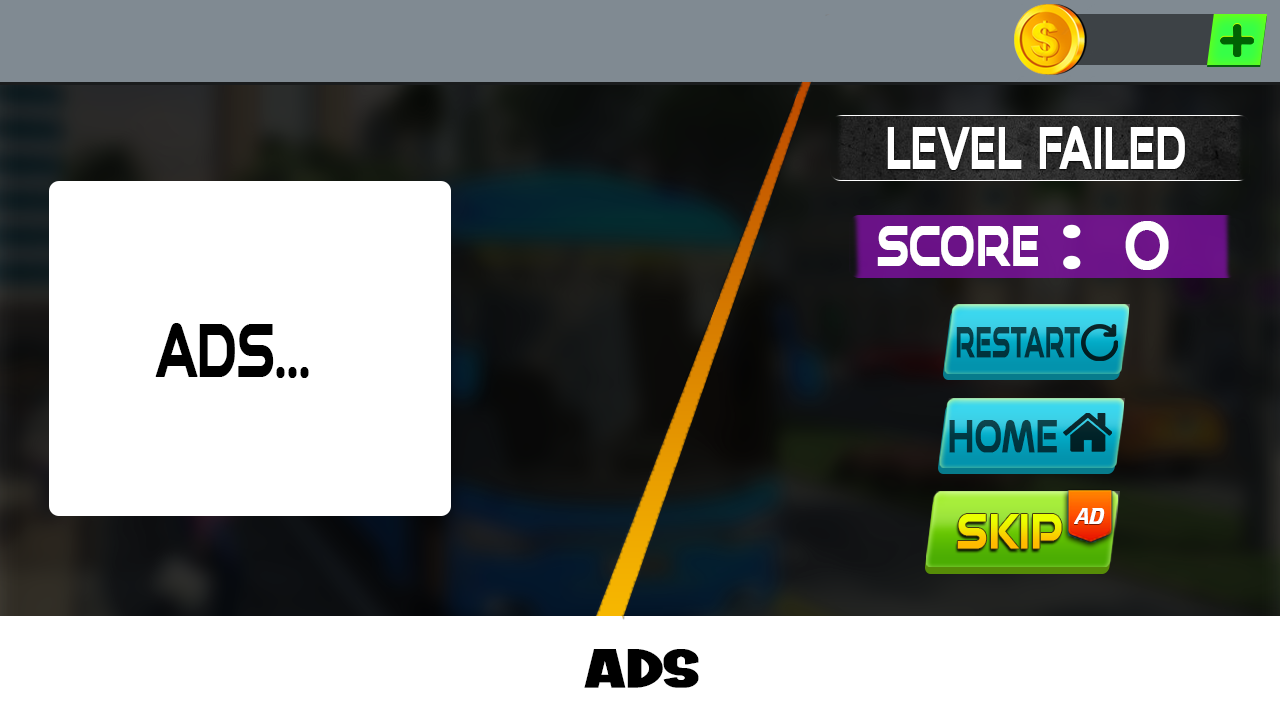
<style>
.page{position:relative;width:1280px;height:720px;background:#ffffff}
.page>*{position:absolute;margin:0}
.t1{font:58.7px "Speedy-Regular";letter-spacing:-0.025em;color:#ffffff;font-weight:bold;scale:0.63 1}
.t2{font:62.1px "Speedy-Regular";letter-spacing:-0.025em;color:#ffffff;font-weight:bold;scale:0.86 1}
.t3{font:55.8px "Speedy-Regular";letter-spacing:-0.025em;color:#ffffff;font-weight:bold;scale:0.73 1}
.t4{font:89.8px "Speedy-Regular";letter-spacing:-0.025em;color:#ffffff;font-weight:bold;scale:1.33 1}
.t5{font:73.9px "Speedy-Regular";letter-spacing:-0.025em;color:#000000;font-weight:bold;scale:0.65 1}
.t6{font:42.8px "Speedy-Regular";letter-spacing:-0.025em;color:#013943;font-weight:bold;scale:0.54 1}
.t7{font:45.1px "Speedy-Regular";letter-spacing:-0.025em;color:#013843;font-weight:bold;scale:0.71 1}
.t8{font:48.5px "Speedy-Regular";letter-spacing:-0.025em;font-weight:bold;scale:0.81 1}
.t9{font:54.4px "ROYALMOSCOWRegular";letter-spacing:-0.025em;color:#000000;font-weight:bold;scale:1.45 1}
</style>
<div class="page">
<p class="t1" style="left:887px;top:126px;width:298px;height:44px">LEVEL FAILED</p>
<p class="t2" style="left:1125px;top:221px;width:44px;height:49px">0</p>
<p class="t3" style="left:877px;top:226px;width:161px;height:40px">SCORE</p>
<p class="t4" style="left:1063px;top:224px;width:18px;height:46px">:</p>
<p class="t5" style="left:155px;top:323px;width:154px;height:55px">ADS...</p>
<p class="t6" style="left:956px;top:327px;width:124px;height:31px">RESTART</p>
<p class="t7" style="left:949px;top:420px;width:108px;height:33px">HOME</p>
<p class="t8" style="left:957px;top:514px;width:105px;height:35px">SKIP</p>
<p class="t9" style="left:584px;top:649px;width:115px;height:39px">ADS</p>
</div>
